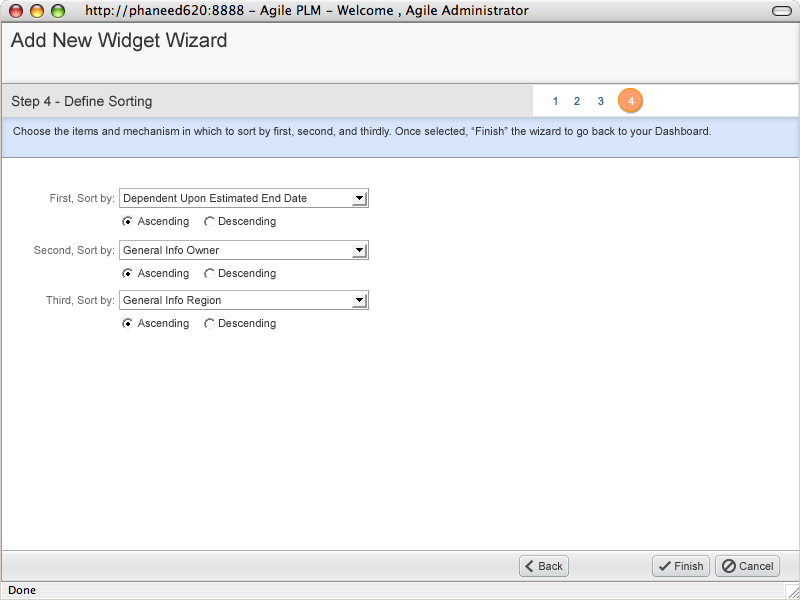
<style>
.page{position:relative;width:800px;height:600px;background:#ffffff}
.page>*{position:absolute;margin:0}
.t1{font:20px "ArialMT";color:#333333}
.t2{font:14px "ArialMT";color:#333333}
.t3{font:11px "ArialMT";color:#336699}
.t4{font:11px "ArialMT";color:#ffffff}
.t5{font:11px "ArialMT";color:#333333}
.t6{font:11px "ArialMT";color:#666666}
</style>
<div class="page">
<p class="t1" style="left:10px;top:32px;width:217px;height:20px">Add New Widget Wizard</p>
<p class="t2" style="left:11px;top:95px;width:141px;height:14px">Step 4 - Define Sorting</p>
<p class="t3" style="left:553px;top:96px;width:27px;height:9px">1     2</p>
<p class="t3" style="left:598px;top:96px;width:36px;height:10px">3        <span class="t4">4</span></p>
<p class="t5" style="left:13px;top:127px;width:698px;height:11px">Choose the items and mechanism in which to sort by first, second, and thirdly. Once selected, “Finish” the wizard to go back to your Dashboard.</p>
<p class="t6" style="left:50px;top:194px;width:64px;height:11px">First, Sort by:</p>
<p class="t5" style="left:124px;top:194px;width:183px;height:11px">Dependent Upon Estimated End Date</p>
<p class="t6" style="left:34px;top:246px;width:80px;height:11px">Second, Sort by:</p>
<p class="t5" style="left:123px;top:246px;width:97px;height:8px">General Info Owner</p>
<p class="t6" style="left:46px;top:296px;width:68px;height:11px">Third, Sort by:</p>
<p class="t5" style="left:123px;top:296px;width:98px;height:11px">General Info Region</p>
<p class="t5" style="left:539px;top:562px;width:24px;height:8px">Back</p>
<p class="t5" style="left:675px;top:562px;width:28px;height:8px">Finish</p>
<p class="t5" style="left:739px;top:562px;width:34px;height:8px">Cancel</p>
</div>
